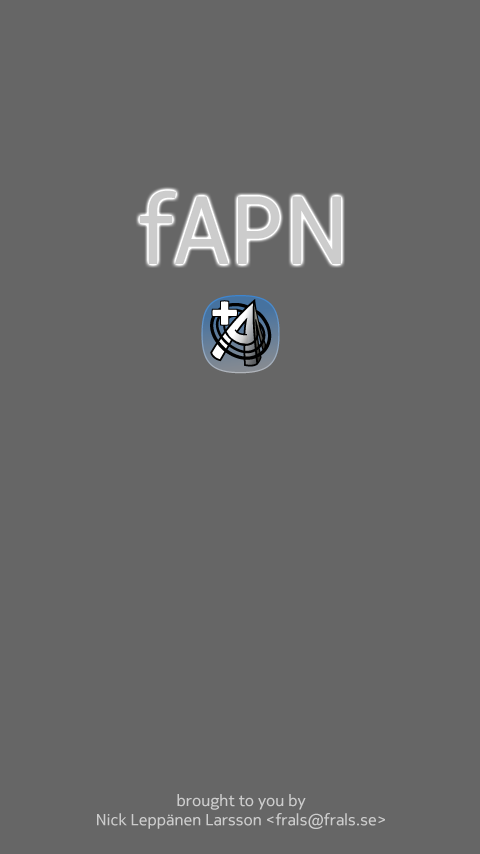
<style>
.page{position:relative;width:480px;height:854px;background:#666666}
.page>*{position:absolute;margin:0}
.t1{font:96px "NokiaPureText-Regular";color:#cccccc}
.t2{font:16px "NokiaPureText-Regular";color:#cccccc}
</style>
<div class="page">
<p class="t1" style="left:139px;top:190px;width:202px;height:74px">fAPN</p>
<p class="t2" style="left:97px;top:794px;width:288px;height:35px;text-align:center">brought to you by<br>Nick Leppänen Larsson &lt;frals@frals.se&gt;</p>
</div>
